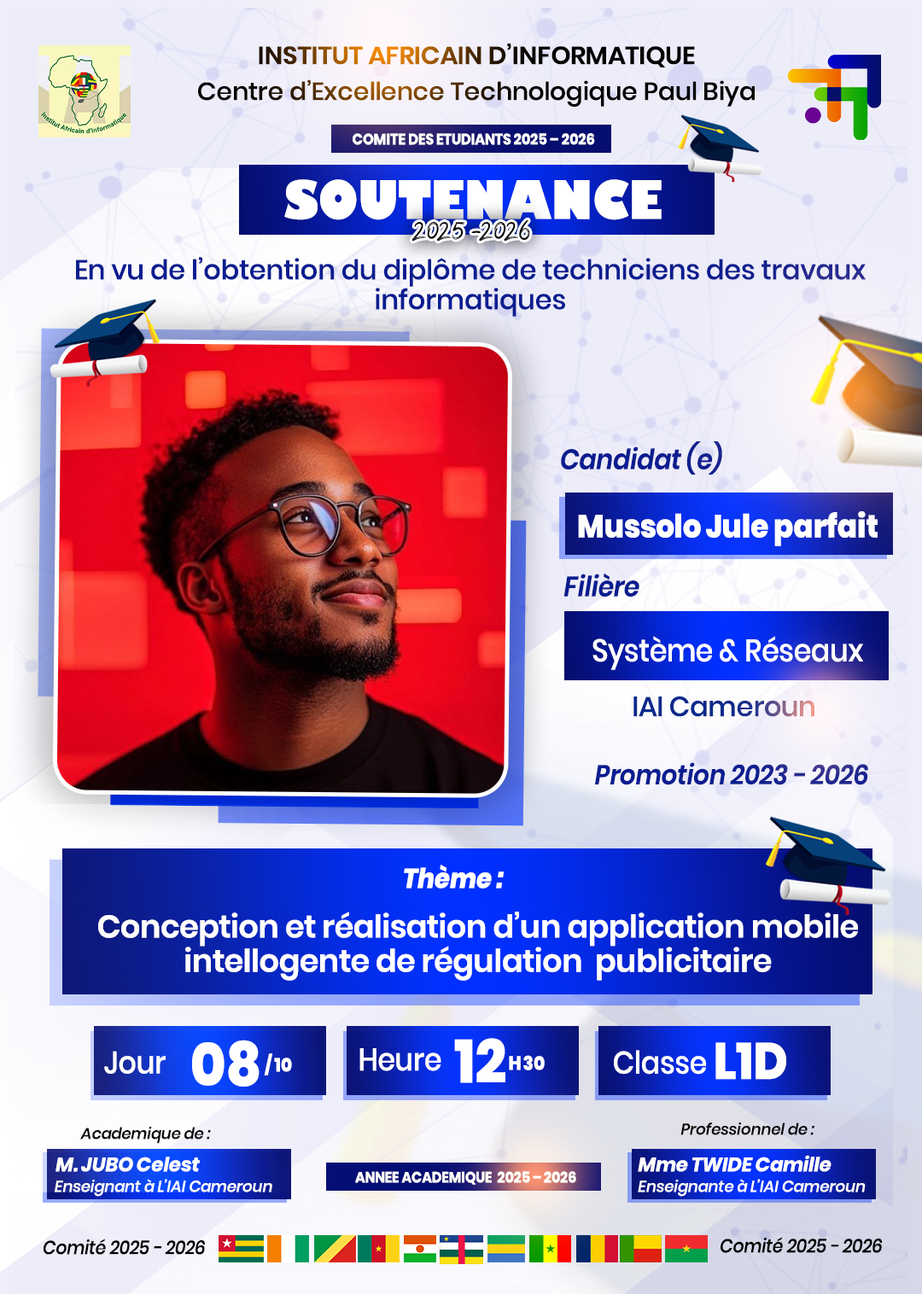
<style>
.page{position:relative;width:922px;height:1294px}
.page>*{position:absolute;margin:0}
.t1{font:24.7px/35.9px "Poppins-Medium";letter-spacing:-0.01em}
.t2{font:24.7px/35.9px "Poppins-SemiBold";letter-spacing:-0.01em}
.t3{font:15.2px "Poppins-Bold";letter-spacing:-0.01em;color:#ffffff;scale:0.91 1}
.t4{font:51.8px "GillSans-UltraBold";letter-spacing:-0.01em;color:#ffffff;scale:0.91 1}
.t5{font:31.3px "BassyRegular";letter-spacing:-0.01em;color:#000000;scale:0.91 1}
.t6{font:27.4px "Poppins-Medium";letter-spacing:-0.01em;color:#0b1d90}
.t7{font:28.1px "Poppins-SemiBoldItalic";letter-spacing:-0.01em;color:#0b1d90;scale:0.91 1}
.t8{font:32px "Poppins-ExtraBold";letter-spacing:-0.01em;color:#ffffff;scale:0.91 1}
.t9{font:31.3px "Poppins-Medium";letter-spacing:-0.01em;color:#ffffff;scale:0.91 1}
.t10{font:27.6px "Poppins-Medium";letter-spacing:-0.01em;color:#0b298c}
.t11{font:27.4px "Poppins-SemiBoldItalic";letter-spacing:-0.01em;color:#0b1d90;scale:0.91 1}
.t12{font:27.4px "Poppins-ExtraBoldItalic";letter-spacing:-0.01em;color:#ffffff;scale:0.91 1}
.t13{font:31.4px "Poppins-SemiBold";letter-spacing:-0.01em;color:#ffffff}
.t14{font:61.1px "Poppins-ExtraBold";letter-spacing:-0.01em;color:#ffffff;scale:0.91 1}
.t15{font:60.3px "Poppins-ExtraBold";letter-spacing:-0.01em;color:#ffffff;scale:0.91 1}
.t16{font:51.2px "Poppins-ExtraBold";letter-spacing:-0.01em;color:#ffffff;scale:0.91 1}
.t17{font:18.8px "Poppins-ExtraBold";letter-spacing:-0.01em;color:#ffffff;scale:0.91 1}
.t18{font:19.1px "Poppins-ExtraBold";letter-spacing:-0.01em;color:#ffffff;scale:0.91 1}
.t19{font:15.6px "Poppins-MediumItalic";letter-spacing:-0.01em;color:#060606}
.t20{font:19.6px "Poppins-BoldItalic";letter-spacing:-0.01em;color:#ffffff}
.t21{font:15.6px "Poppins-MediumItalic";letter-spacing:-0.01em;color:#ffffff}
.t22{font:15px "Poppins-Bold";letter-spacing:-0.01em;color:#ffffff;scale:0.91 1}
.t23{font:15.6px "Poppins-MediumItalic";letter-spacing:-0.01em;color:#fdfdfd}
.t24{font:19px "Poppins-MediumItalic";letter-spacing:-0.01em;color:#000000;scale:0.91 1}
</style>
<div class="page">
<p class="t1" style="left:198px;top:44px;width:556px;height:63px;text-align:center"><span class="t2">INSTITUT AFRICAIN D’INFORMATIQUE<br></span>Centre d’Excellence Technologique Paul Biya</p>
<p class="t3" style="left:352px;top:133px;width:243px;height:12px">COMITE DES ETUDIANTS 2025 – 2026</p>
<p class="t4" style="left:284px;top:179px;width:377px;height:41px">SOUTENANCE</p>
<p class="t5" style="left:411px;top:219px;width:119px;height:23px">2025 -2026</p>
<p class="t6" style="left:76px;top:257px;width:789px;height:60px;text-align:center">En vu de l’obtention du diplôme de techniciens des travaux<br>informatiques</p>
<p class="t7" style="left:561px;top:441px;width:161px;height:33px">Candidat (e)</p>
<p class="t8" style="left:578px;top:511px;width:299px;height:35px">Mussolo Jule parfait</p>
<p class="t7" style="left:563px;top:573px;width:76px;height:24px">Filière</p>
<p class="t9" style="left:592px;top:636px;width:271px;height:34px">Système &amp; Réseaux</p>
<p class="t10" style="left:633px;top:696px;width:181px;height:21px">IAI Cameroun</p>
<p class="t11" style="left:595px;top:762px;width:273px;height:23px">Promotion 2023 - 2026</p>
<p class="t12" style="left:404px;top:864px;width:100px;height:24px">Thème :</p>
<p class="t13" style="left:98px;top:911px;width:760px;height:70px;text-align:center">Conception et réalisation d’un application mobile<br>intellogente de régulation  publicitaire</p>
<p class="t14" style="left:454px;top:1038px;width:51px;height:45px">12</p>
<p class="t15" style="left:192px;top:1039px;width:67px;height:47px">08</p>
<p class="t9" style="left:359px;top:1048px;width:82px;height:23px">Heure</p>
<p class="t9" style="left:614px;top:1050px;width:93px;height:24px">Classe</p>
<p class="t16" style="left:715px;top:1042px;width:71px;height:38px">L1D</p>
<p class="t9" style="left:104px;top:1051px;width:62px;height:23px">Jour</p>
<p class="t17" style="left:264px;top:1053px;width:28px;height:22px">/ 10</p>
<p class="t18" style="left:509px;top:1056px;width:12px;height:14px">H</p>
<p class="t18" style="left:523px;top:1055px;width:21px;height:15px">30</p>
<p class="t19" style="left:80px;top:1126px;width:131px;height:18px">Academique de :</p>
<p class="t19" style="left:680px;top:1122px;width:134px;height:13px">Professionnel de :</p>
<p class="t20" style="left:55px;top:1156px;width:145px;height:16px">M. JUBO Celest</p>
<p class="t20" style="left:637px;top:1155px;width:194px;height:17px">Mme TWIDE Camille</p>
<p class="t21" style="left:55px;top:1179px;width:217px;height:17px">Enseignant à L’IAI Cameroun</p>
<p class="t22" style="left:355px;top:1171px;width:221px;height:14px">ANNEE ACADEMIQUE  2025 – 2026</p>
<p class="t23" style="left:637px;top:1179px;width:228px;height:17px">Enseignante à L’IAI Cameroun</p>
<p class="t24" style="left:44px;top:1238px;width:161px;height:17px">Comité 2025 - 2026</p>
<p class="t24" style="left:720px;top:1237px;width:162px;height:16px">Comité 2025 - 2026</p>
</div>
